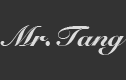
<style>
.page{position:relative;width:126px;height:80px;background:#333333}
.page>*{position:absolute;margin:0}
.t1{font:28px "SnellRoundhand-Black";color:#dcdcdc}
</style>
<div class="page">
<p class="t1" style="left:0px;top:25px;width:127px;height:30px">Mr.Tang</p>
</div>
